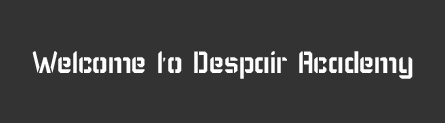
<style>
.page{position:relative;width:445px;height:123px;background:#333333}
.page>*{position:absolute;margin:0}
.t1{font:36px "KarismaStencil";color:#ffffff}
</style>
<div class="page">
<p class="t1" style="left:32px;top:51px;width:381px;height:28px">Welcome to Despair Academy</p>
</div>
